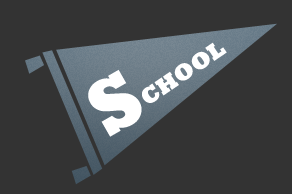
<style>
.page{position:relative;width:292px;height:194px;background:#333333}
.page>*{position:absolute;margin:0}
.t1{font:23.6px "Rockwell-ExtraBold";color:#ffffff}
.t2{font:79.4px "Rockwell-ExtraBold";color:#ffffff}
</style>
<div class="page">
<p class="t1" style="left:142px;top:42px;width:85px;height:61px;rotate:-34deg">CHOOL</p>
<p class="t2" style="left:88px;top:69px;width:54px;height:68px;rotate:-30deg">S</p>
</div>
